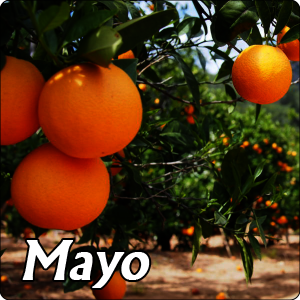
<style>
.page{position:relative;width:300px;height:300px}
.page>*{position:absolute;margin:0}
.t1{font:55.6px "Narkisim";color:#ffffff;font-weight:bold;font-style:italic}
</style>
<div class="page">
<p class="t1" style="left:22px;top:240px;width:128px;height:48px">Mayo</p>
</div>
